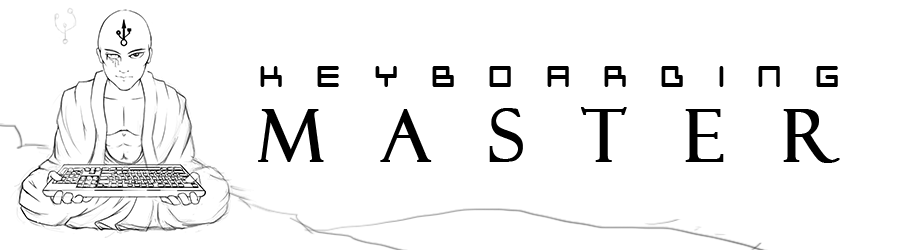
<style>
.page{position:relative;width:900px;height:250px;background:#ffffff}
.page>*{position:absolute;margin:0}
.t1{font:39.9px/73.7px "Neustyle";color:#000000}
.t2{font:72.2px/73.7px "FelixTitlingMT";color:#000000;font-weight:bold}
</style>
<div class="page">
<p class="t1" style="left:258px;top:66px;width:582px;height:97px;text-align:justify">KEYBOARDING <br><span class="t2">MASTER</span></p>
</div>
